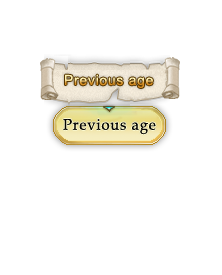
<style>
.page{position:relative;width:222px;height:275px;background:#ffffff}
.page>*{position:absolute;margin:0}
.t1{font:15.4px "BookAntiqua";letter-spacing:0.05em;color:#070502;scale:0.97 1}
</style>
<div class="page">
<p class="t1" style="left:63px;top:119px;width:93px;height:16px">Previous age</p>
</div>
